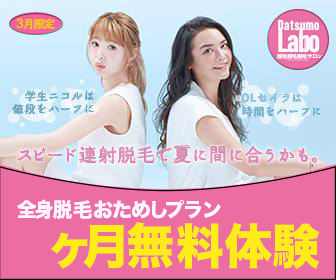
<style>
.page{position:relative;width:336px;height:280px;background:#ec6da2}
.page>*{position:absolute;margin:0}
.t1{font:12px "Klee-Medium";color:#edcd0d}
.t2{font:14px "DINCondensed-Bold";color:#f7ffff}
.t3{font:33px "DINCondensed-Bold";color:#fff7fd}
.t4{font:5px "HiraKakuProN-W3";color:#f8ffff}
.t5{font:12px "Klee-Medium";color:#7ea6bf}
.t6{font:12px "AppleSDGothicNeo-Heavy";color:#9bc2d9}
.t7{font:12px "Klee-Medium";color:#9bc2d9}
.t8{font:12px "Klee-Medium";color:#79a2bc}
.t9{font:12px "Klee-Medium";color:#85b4cf}
.t10{font:16px "Klee-Medium";color:#d191b1}
.t11{font:18px "Klee-Medium";color:#d191b1}
.t12{font:20px "Klee-Medium";color:#d191b1}
.t13{font:16px "Klee-Medium";color:#dca1c4}
.t14{font:20px "HiraKakuStd-W8";color:#fdf5ff}
.t15{font:48px "HiraKakuStdN-W8";color:#fdec17}
.t16{font:48px "HiraKakuStd-W8";color:#fdec17}
</style>
<div class="page">
<p class="t1" style="left:17px;top:18px;width:38px;height:12px">3月限定</p>
<p class="t2" style="left:278px;top:20px;width:41px;height:10px">Datsumo</p>
<p class="t3" style="left:278px;top:28px;width:42px;height:24px">Labo</p>
<p class="t4" style="left:277px;top:53px;width:45px;height:6px">脱毛脱毛脱毛サロン</p>
<p class="t5" style="left:25px;top:90px;width:69px;height:12px">学生ニコルは</p>
<p class="t6" style="left:241px;top:92px;width:60px;height:11px">OLセイ<span class="t7">ラは</span></p>
<p class="t8" style="left:11px;top:103px;width:83px;height:11px">値段をハーフに</p>
<p class="t9" style="left:242px;top:106px;width:79px;height:12px">時間をハーフに</p>
<p class="t10" style="left:19px;top:145px;width:298px;height:18px">スピード<span class="t11">連射脱毛</span>で<span class="t12">夏</span>に<span class="t12">間</span>に<span class="t11">合</span>うかも<span class="t13">。</span></p>
<p class="t14" style="left:17px;top:199px;width:204px;height:21px">全身脱毛おためしプラン</p>
<p class="t15" style="left:50px;top:222px;width:270px;height:47px"><span class="t16">ヶ</span>月無料体験</p>
</div>
